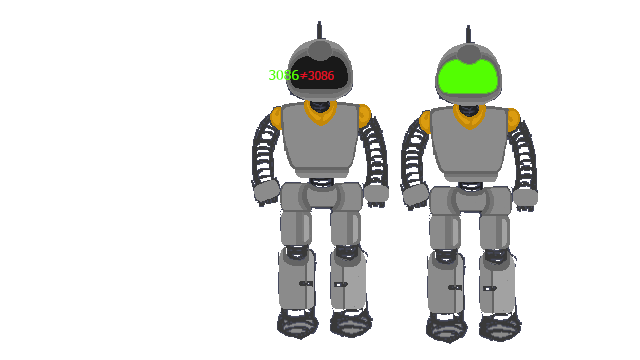
<style>
.page{position:relative;width:640px;height:360px;background:#ffffff}
.page>*{position:absolute;margin:0}
.t1{font:14px "Tahoma";color:#53fe02}
.t2{font:12px "Tahoma";color:#53fe02}
.t3{font:12px "Tahoma";color:#e71022}
</style>
<div class="page">
<p class="t1" style="left:269px;top:70px;width:30px;height:10px"><span class="t2"><br></span>3086</p>
<p class="t3" style="left:300px;top:71px;width:34px;height:9px">≠3086</p>
</div>
